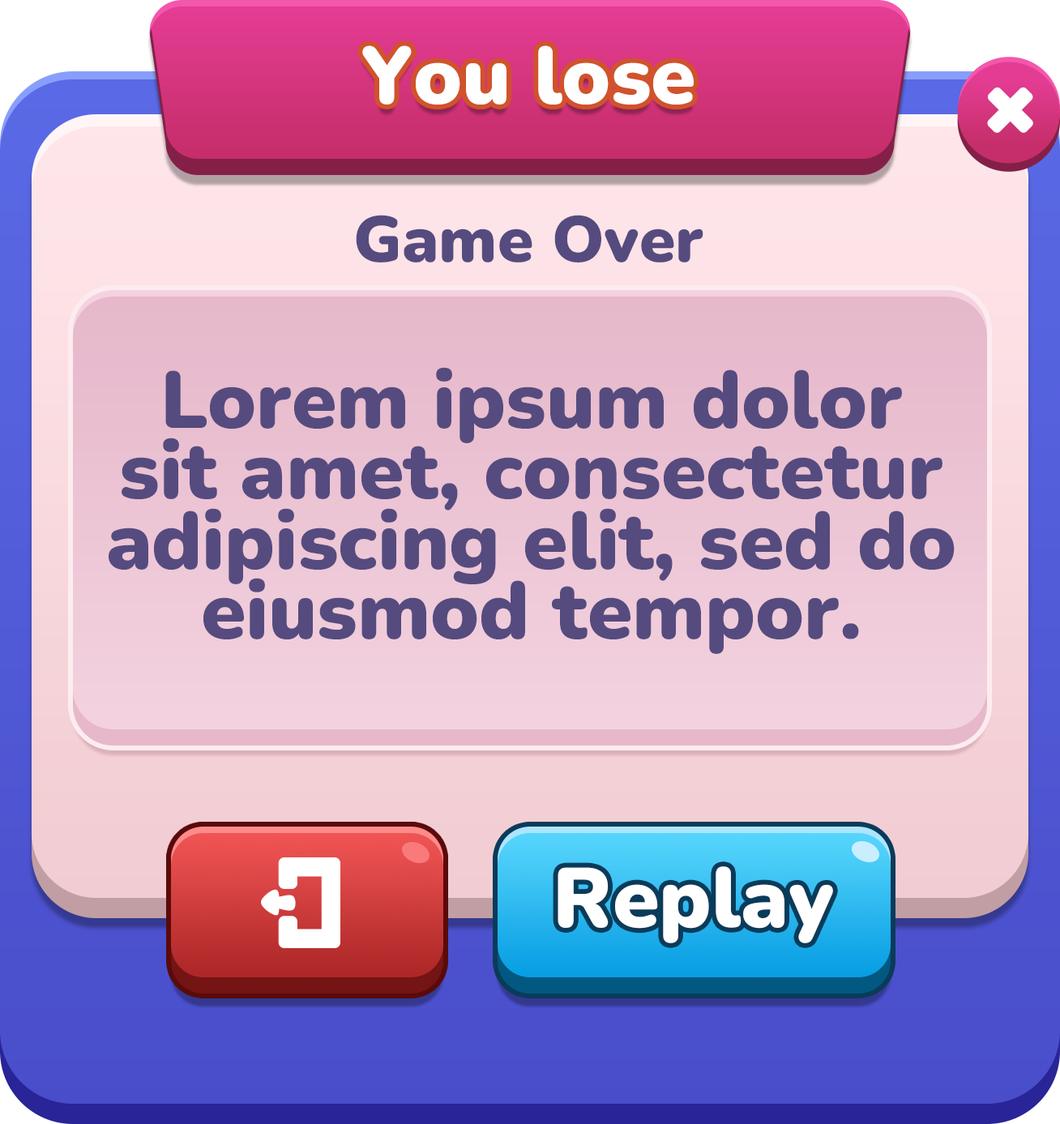
<style>
.page{position:relative;width:1060px;height:1124px}
.page>*{position:absolute;margin:0}
.t1{font:81.1px "Nunito-Black";color:#ffffff}
.t2{font:64.9px "Nunito-Black";color:#554b7f}
.t3{font:81.1px/70.3px "Nunito-Black";color:#554b7f}
.t4{font:84.3px "Nunito-Black";color:#ffffff}
</style>
<div class="page">
<p class="t1" style="left:362px;top:45px;width:332px;height:60px">You lose</p>
<p class="t2" style="left:356px;top:215px;width:348px;height:48px">Game Over</p>
<p class="t3" style="left:109px;top:367px;width:846px;height:287px;text-align:center">Lorem ipsum dolor sit amet, consectetur adipiscing elit, sed do eiusmod tempor.</p>
<p class="t4" style="left:558px;top:867px;width:275px;height:77px">Replay</p>
</div>
